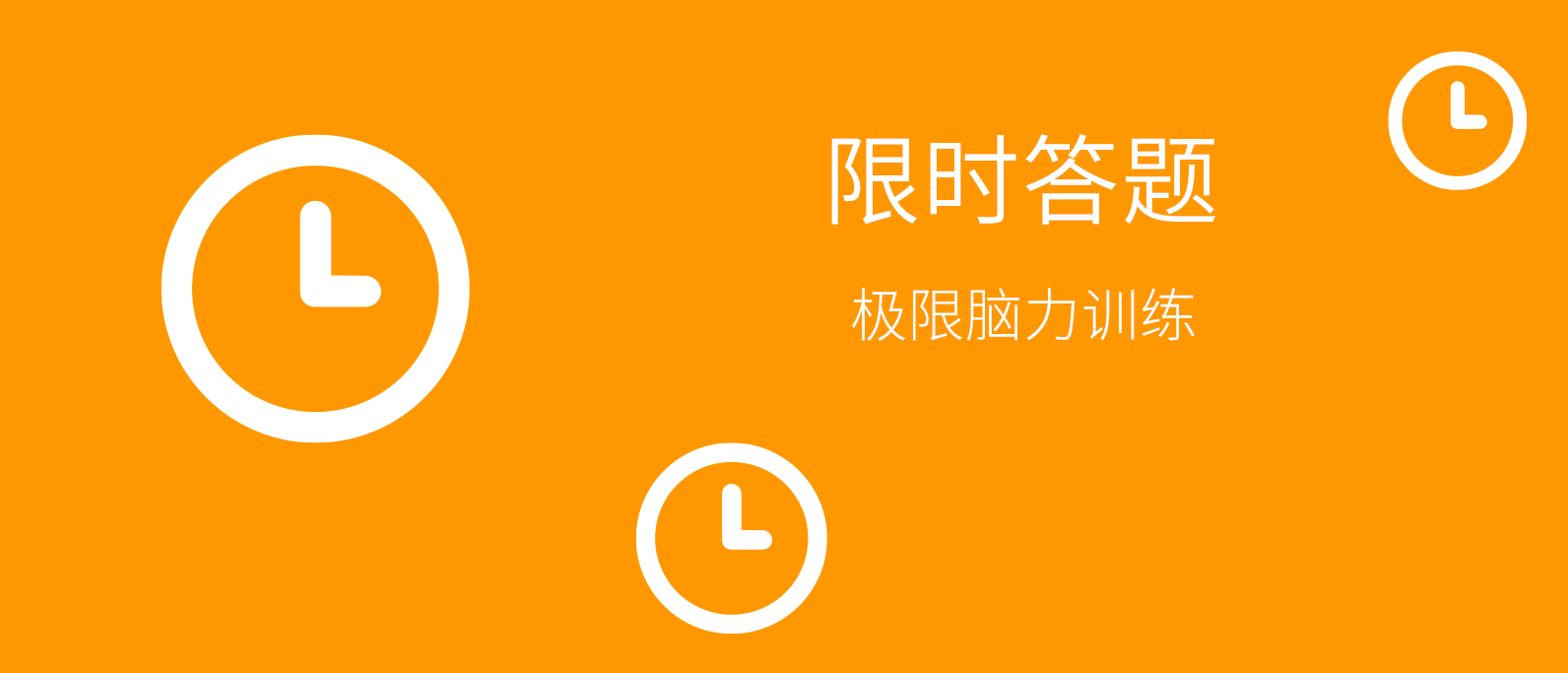
<style>
.page{position:relative;width:1568px;height:673px;background:#ff9800}
.page>*{position:absolute;margin:0}
.t1{font:98.5px "SourceHanSansCN-Normal";letter-spacing:0.01em;color:#fefefe}
.t2{font:57.5px "SourceHanSansCN-Light";letter-spacing:0.01em;color:#fefefe}
</style>
<div class="page">
<p class="t1" style="left:831px;top:134px;width:384px;height:91px">限时答题</p>
<p class="t2" style="left:852px;top:288px;width:343px;height:53px">极限脑力训练</p>
</div>
